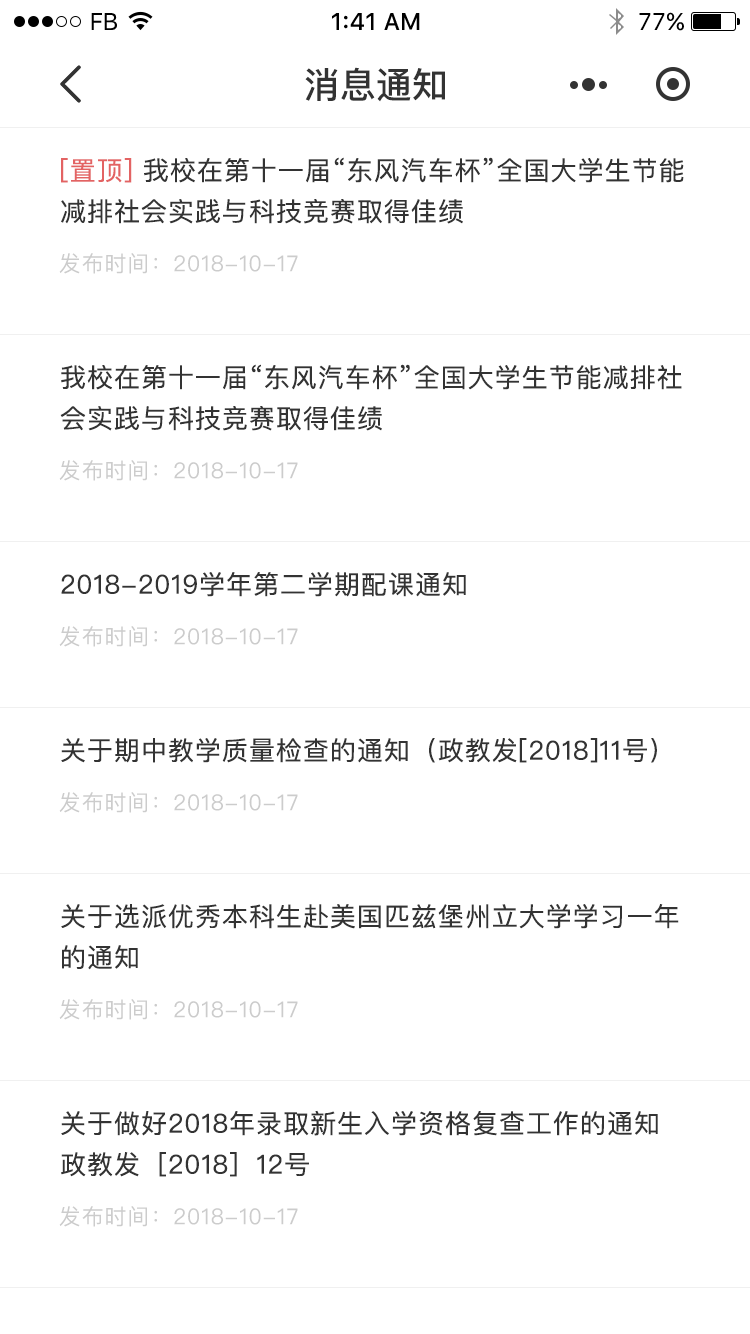
<style>
.page{position:relative;width:750px;height:1334px;background:#ffffff}
.page>*{position:absolute;margin:0}
.t1{font:24px "SFUIText-Regular";letter-spacing:-0.025em;color:#000000}
.t2{font:24px "SFUIText-Medium";color:#000000}
.t3{font:24px "SFUIText-Regular";color:#000000}
.t4{font:36px "PingFangSC-Medium";color:#333333}
.t5{font:26px/41px "PingFangSC-Regular";letter-spacing:0.038em;color:#333333}
.t6{font:26px/41px "PingFangSC-Regular";letter-spacing:0.038em;color:#e36363}
.t7{font:22px "PingFangSC-Regular";letter-spacing:0.038em;color:#cccccc}
.t8{font:26px "PingFangSC-Regular";letter-spacing:0.038em;color:#333333}
</style>
<div class="page">
<p class="t1" style="left:91px;top:13px;width:26px;height:17px">FB</p>
<p class="t2" style="left:332px;top:13px;width:88px;height:17px">1:41 AM</p>
<p class="t3" style="left:639px;top:12px;width:45px;height:19px">77%</p>
<p class="t4" style="left:305px;top:67px;width:140px;height:35px">消息通知</p>
<p class="t5" style="left:61px;top:157px;width:623px;height:67px"><span class="t6">[置顶]</span> 我校在第十一届“东风汽车杯”全国大学生节能减排社会实践与科技竞赛取得佳绩</p>
<p class="t7" style="left:59px;top:253px;width:239px;height:21px">发布时间：2018-10-17</p>
<p class="t5" style="left:60px;top:364px;width:622px;height:67px">我校在第十一届“东风汽车杯”全国大学生节能减排社会实践与科技竞赛取得佳绩</p>
<p class="t7" style="left:59px;top:460px;width:239px;height:21px">发布时间：2018-10-17</p>
<p class="t8" style="left:61px;top:572px;width:405px;height:25px">2018-2019学年第二学期配课通知</p>
<p class="t7" style="left:59px;top:626px;width:239px;height:21px">发布时间：2018-10-17</p>
<p class="t8" style="left:61px;top:738px;width:596px;height:25px">关于期中教学质量检查的通知（政教发[2018]11号）</p>
<p class="t7" style="left:59px;top:792px;width:239px;height:21px">发布时间：2018-10-17</p>
<p class="t5" style="left:61px;top:904px;width:618px;height:66px">关于选派优秀本科生赴美国匹兹堡州立大学学习一年的通知</p>
<p class="t7" style="left:59px;top:999px;width:239px;height:21px">发布时间：2018-10-17</p>
<p class="t5" style="left:61px;top:1110px;width:597px;height:67px">关于做好2018年录取新生入学资格复查工作的通知 政教发［2018］12号</p>
<p class="t7" style="left:59px;top:1206px;width:239px;height:21px">发布时间：2018-10-17</p>
</div>
